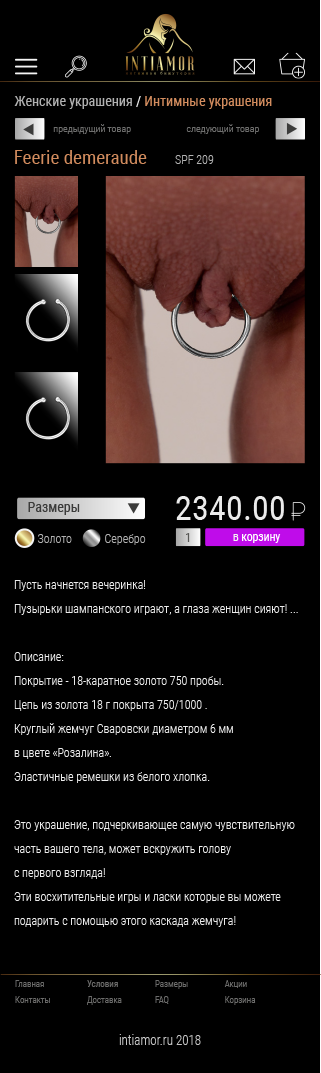
<style>
.page{position:relative;width:321px;height:1073px;background:#000000}
.page>*{position:absolute;margin:0}
.t1{font:14px "RobotoCondensed-Regular";color:#d38d5e}
.t2{font:14px "RobotoCondensed-Regular";color:#b1b1b1}
.t3{font:14px "RobotoCondensed-Regular";color:#ececec}
.t4{font:10px "RobotoCondensed-Light";color:#6f6f6e}
.t5{font:18.9px "RobotoCondensed-Regular";color:#d38d5e}
.t6{font:12px "RobotoCondensed-Light";color:#b1b1b1}
.t7{font:34.5px "RobotoCondensed-Regular";color:#ececec}
.t8{font:14px "RobotoCondensed-Regular";color:#3c3c3b}
.t9{font:11.6px "RobotoCondensed-Regular";color:#575756}
.t10{font:11.6px "RobotoCondensed-Regular";color:#ffffff}
.t11{font:11.6px "RobotoCondensed-Regular";color:#f5f5f5}
.t12{font:12px/24px "RobotoCondensed-Light";color:#ececec}
.t13{font:9px/16px "RobotoCondensed-Light";color:#6f6f6e}
.t14{font:9px/16px "RobotoCondensed-Regular";color:#6f6f6e}
.t15{font:14px "RobotoCondensed-Light";color:#c6c6c5;scale:0.92 1}
</style>
<div class="page">
<p class="t1" style="left:14px;top:96px;width:258px;height:13px"><span class="t2">Женские украшения</span><span class="t3"> / </span>Интимные украшения</p>
<p class="t4" style="left:53px;top:124px;width:78px;height:10px">предыдущий товар</p>
<p class="t4" style="left:186px;top:124px;width:73px;height:10px">следующий товар</p>
<p class="t5" style="left:15px;top:150px;width:132px;height:14px">Feerie demeraude</p>
<p class="t6" style="left:175px;top:155px;width:39px;height:9px">SPF 209</p>
<p class="t7" style="left:176px;top:496px;width:108px;height:24px">2340.00</p>
<p class="t8" style="left:28px;top:502px;width:52px;height:13px">Размеры</p>
<p class="t6" style="left:37px;top:534px;width:35px;height:9px">Золото</p>
<p class="t6" style="left:105px;top:534px;width:41px;height:11px">Серебро</p>
<p class="t9" style="left:186px;top:533px;width:4px;height:9px">1</p>
<p class="t10" style="left:233px;top:534px;width:48px;height:9px"><span class="t11">в </span>корзину</p>
<p class="t12" style="left:14px;top:580px;width:284px;height:347px">Пусть начнется вечеринка! <br>Пузырьки шампанского играют, а глаза женщин сияют! ...<br><br>Описание:<br>Покрытие - 18-каратное золото 750 пробы. <br>Цепь из золота 18 г покрыта 750/1000 . <br>Круглый жемчуг Сваровски диаметром 6 мм <br>в цвете «Розалина». <br>Эластичные ремешки из белого хлопка.<br><br>Это украшение, подчеркивающее самую чувствительную <br>часть вашего тела, может вскружить голову <br>с первого взгляда! <br>Эти восхитительные игры и ласки которые вы можете <br>подарить с помощью этого каскада жемчуга!</p>
<p class="t13" style="left:15px;top:980px;width:35px;height:23px">Главная        <br>Контакты</p>
<p class="t13" style="left:87px;top:980px;width:35px;height:25px"><span class="t14">Условия        <br></span>Доставка</p>
<p class="t13" style="left:155px;top:980px;width:33px;height:24px">Размеры        <br>FAQ</p>
<p class="t13" style="left:224px;top:980px;width:32px;height:25px">Акции        <br>Корзина</p>
<p class="t15" style="left:119px;top:1034px;width:82px;height:11px">intiamor.ru 2018</p>
</div>
